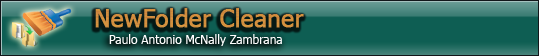
<style>
.page{position:relative;width:539px;height:56px;background:#0e5e53}
.page>*{position:absolute;margin:0}
.t1{font:24px "Tahoma";color:#d18e3e;font-weight:bold}
.t2{font:12px "Tahoma";color:#fefefe}
</style>
<div class="page">
<p class="t1" style="left:95px;top:8px;width:209px;height:20px">NewFolder Cleaner</p>
<p class="t2" style="left:109px;top:34px;width:173px;height:12px">Paulo Antonio McNally Zambrana</p>
</div>
